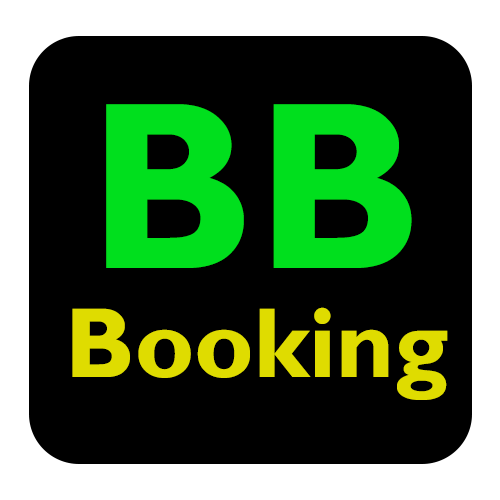
<style>
.page{position:relative;width:500px;height:500px;background:#000000}
.page>*{position:absolute;margin:0}
.t1{font:240px "GillSansMT-Bold";color:#00df1d}
.t2{font:100px "GillSansMT-Bold";color:#dfdc00}
</style>
<div class="page">
<p class="t1" style="left:106px;top:104px;width:306px;height:164px">BB</p>
<p class="t2" style="left:72px;top:307px;width:376px;height:93px">Booking</p>
</div>
